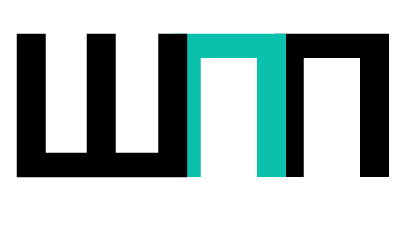
<style>
.page{position:relative;width:400px;height:250px;background:#ffffff}
.page>*{position:absolute;margin:0}
.t1{font:200px "Arial-BoldMT";color:#000000}
.t2{font:200px "Arial-BoldMT";color:#0bc0ad}
</style>
<div class="page">
<p class="t1" style="left:16px;top:33px;width:172px;height:145px">Ш</p>
<p class="t2" style="left:171px;top:33px;width:115px;height:144px">П</p>
<p class="t1" style="left:274px;top:33px;width:115px;height:144px">П</p>
</div>
